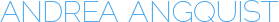
<style>
.page{position:relative;width:279px;height:22px;background:#ffffff}
.page>*{position:absolute;margin:0}
.t1{font:30px "Raleway-Thin";color:#55acee;text-transform:uppercase}
</style>
<div class="page">
<p class="t1" style="left:0px;top:0px;width:279px;height:22px">Andrea Angquist</p>
</div>
